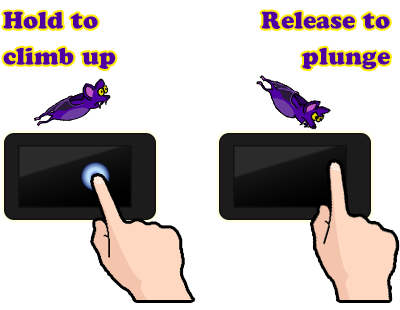
<style>
.page{position:relative;width:400px;height:310px;background:#ffffff}
.page>*{position:absolute;margin:0}
.t1{font:24px/36px "CooperBlackStd";color:#4f00a0}
</style>
<div class="page">
<p class="t1" style="left:3px;top:11px;width:113px;height:58px">Hold to<br>climb up</p>
<p class="t1" style="left:261px;top:11px;width:129px;height:59px;text-align:right">Release to<br>plunge</p>
</div>
